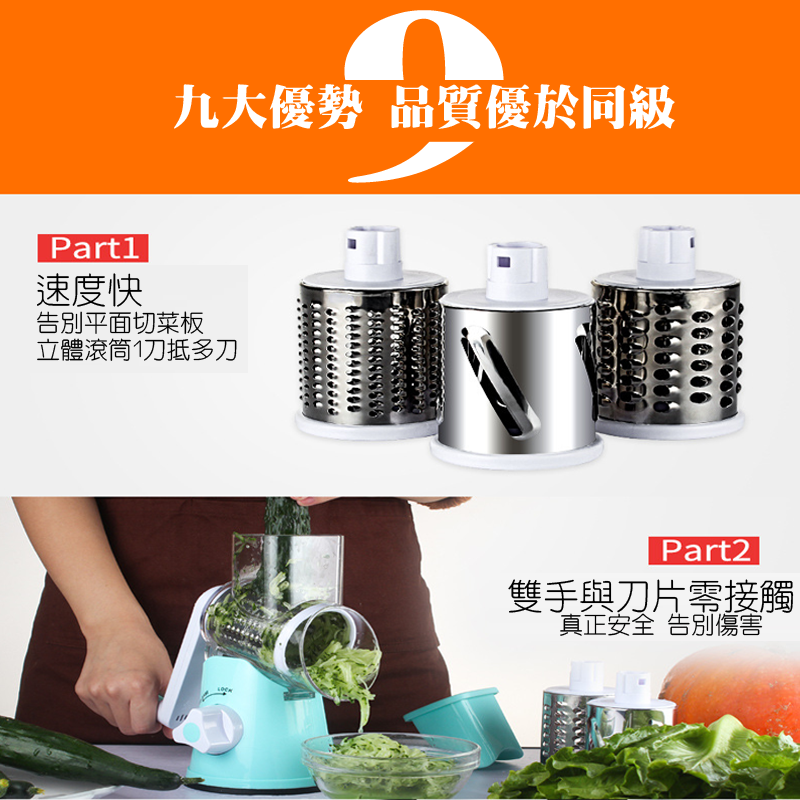
<style>
.page{position:relative;width:800px;height:800px;background:#ff6f00}
.page>*{position:absolute;margin:0}
.t1{font:234.3px "HanWangMingBlack";color:#ffffff;scale:1.46 1}
.t2{font:48px "HanWangMingBlack";color:#ffffff}
.t3{font:36px "HanWangYenLight";color:#000000}
.t4{font:24px "HanWangYenLight";color:#000000}
</style>
<div class="page">
<p class="t1" style="left:344px;top:10px;width:160px;height:173px">9</p>
<p class="t2" style="left:174px;top:84px;width:501px;height:45px">九大優勢 品質優於同級</p>
<p class="t3" style="left:37px;top:273px;width:105px;height:34px">速度快</p>
<p class="t4" style="left:37px;top:311px;width:200px;height:50px">告別平面切菜板<br>立體滾筒1刀抵多刀</p>
<p class="t3" style="left:508px;top:579px;width:286px;height:34px">雙手與刀片零接觸</p>
<p class="t4" style="left:560px;top:613px;width:203px;height:23px">真正安全 告別傷害</p>
</div>
